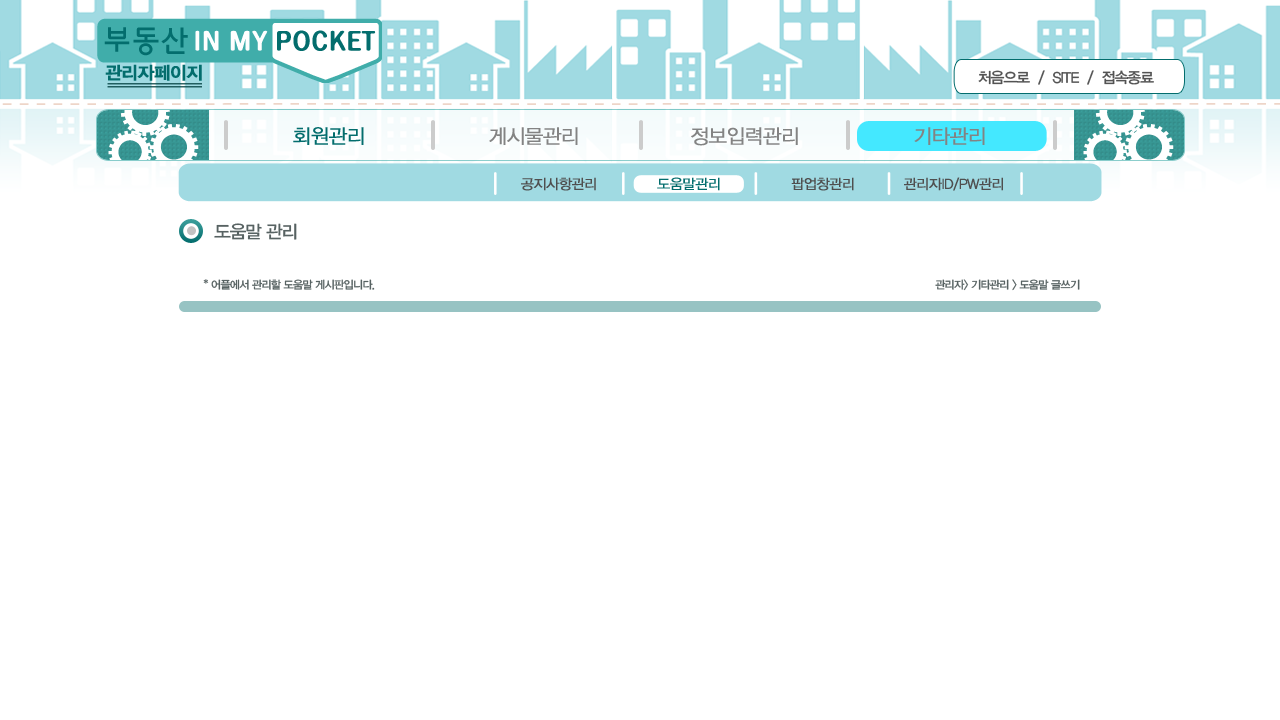
<style>
.page{position:relative;width:1280px;height:720px;background:#ffffff}
.page>*{position:absolute;margin:0}
.t1{font:17.8px "YDIYGO340";letter-spacing:-0.04em;color:#036d6d;font-weight:bold}
.t2{font:15px "YDIYGO330";letter-spacing:-0.06em;color:#535353}
.t3{font:20px "YDIYGO320";letter-spacing:-0.04em;color:#036d6d;font-weight:bold}
.t4{font:20px "YDIYGO320";letter-spacing:-0.04em;color:#838383;font-weight:bold}
.t5{font:14px "YDIYGO320";letter-spacing:-0.04em;color:#4f4f4f;font-weight:bold}
.t6{font:14px "YDIYGO320";letter-spacing:-0.04em;color:#036d6d;font-weight:bold}
.t7{font:18px "YDIYGO330";letter-spacing:-0.06em;color:#576262}
.t8{font:11px "YDIYGO330";letter-spacing:-0.06em;color:#576262}
</style>
<div class="page">
<p class="t1" style="left:105px;top:64px;width:97px;height:17px">관리자페이지</p>
<p class="t2" style="left:978px;top:70px;width:176px;height:15px">처음으로  /  SITE  /  접속종료</p>
<p class="t3" style="left:293px;top:127px;width:71px;height:18px">회원관리</p>
<p class="t4" style="left:489px;top:127px;width:89px;height:18px">게시물관리</p>
<p class="t4" style="left:691px;top:127px;width:107px;height:19px">정보입력관리</p>
<p class="t4" style="left:914px;top:127px;width:71px;height:18px">기타관리</p>
<p class="t5" style="left:521px;top:177px;width:75px;height:14px">공지사항관리</p>
<p class="t6" style="left:657px;top:177px;width:63px;height:14px">도움말관리</p>
<p class="t5" style="left:791px;top:177px;width:63px;height:14px">팝업창관리</p>
<p class="t5" style="left:904px;top:177px;width:99px;height:14px">관리자ID/PW관리</p>
<p class="t7" style="left:214px;top:223px;width:83px;height:17px">도움말 관리</p>
<p class="t8" style="left:203px;top:279px;width:172px;height:11px">* 어플에서 관리할 도움말 게시판입니다.</p>
<p class="t8" style="left:935px;top:279px;width:145px;height:12px">관리자&gt; 기타관리 &gt; 도움말 글쓰기</p>
</div>
